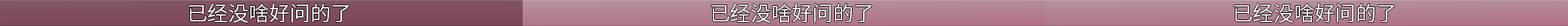
<style>
.page{position:relative;width:1568px;height:26px}
.page>*{position:absolute;margin:0}
.t1{font:20.6px "SourceHanSansSC-Normal";color:#ffffff}
</style>
<div class="page">
<p class="t1" style="left:189px;top:3px;width:161px;height:20px">已经没啥好问的了</p>
<p class="t1" style="left:711px;top:3px;width:161px;height:20px">已经没啥好问的了</p>
<p class="t1" style="left:1234px;top:3px;width:161px;height:20px">已经没啥好问的了</p>
</div>
